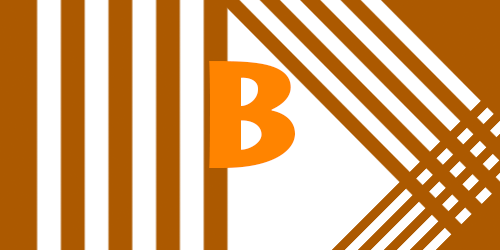
<style>
.page{position:relative;width:500px;height:250px;background:#ac5900}
.page>*{position:absolute;margin:0}
.t1{font:149px "LithosPro-Black";color:#ff8400}
</style>
<div class="page">
<p class="t1" style="left:209px;top:61px;width:86px;height:107px">B</p>
</div>
